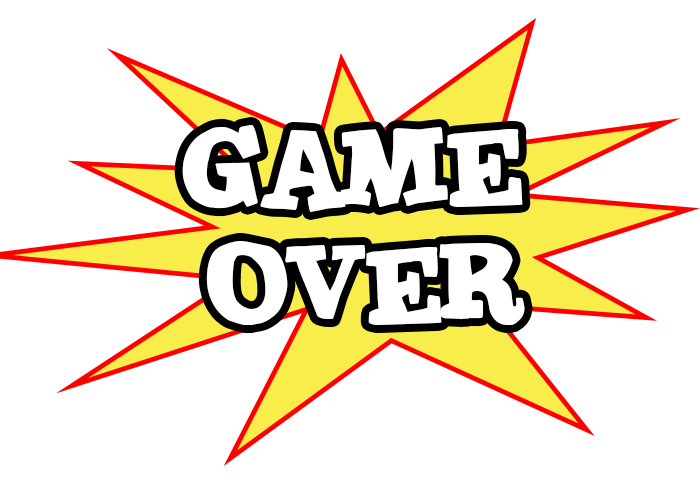
<style>
.page{position:relative;width:700px;height:500px;background:#ffffff}
.page>*{position:absolute;margin:0}
.t1{font:120.3px "JointbyPizzaDude";color:#ffffff}
</style>
<div class="page">
<p class="t1" style="left:182px;top:125px;width:341px;height:87px">GAME</p>
<p class="t1" style="left:206px;top:241px;width:319px;height:84px">OVER</p>
</div>
